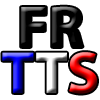
<style>
.page{position:relative;width:100px;height:100px;background:#ffffff}
.page>*{position:absolute;margin:0}
.t1{font:59px "MyriadPro-Bold"}
</style>
<div class="page">
<p class="t1" style="left:2px;top:6px;width:95px;height:88px;text-align:center">FR<br>TTS</p>
</div>
